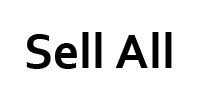
<style>
.page{position:relative;width:197px;height:100px;background:#ffffff}
.page>*{position:absolute;margin:0}
.t1{font:50.8px "Corbel-Bold";color:#000000}
</style>
<div class="page">
<p class="t1" style="left:26px;top:32px;width:146px;height:37px">Sell All</p>
</div>
